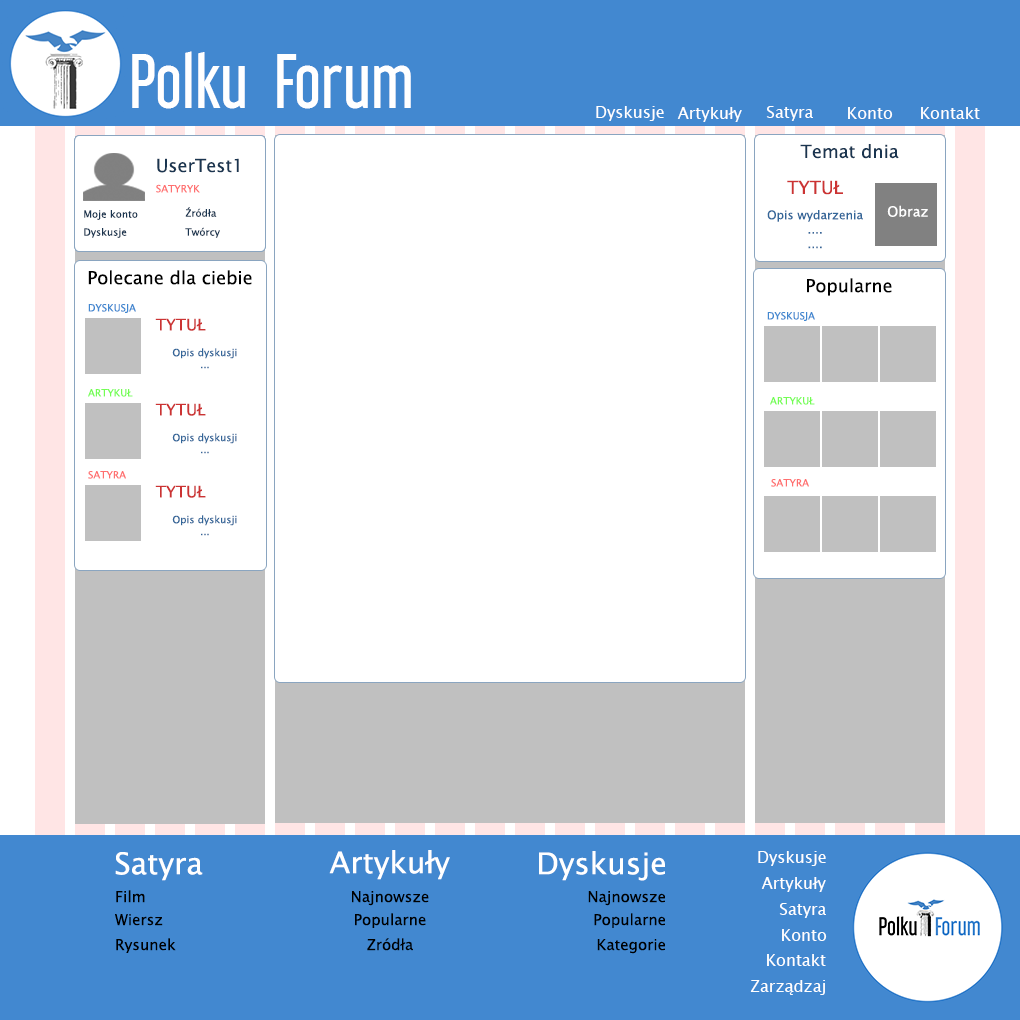
<style>
.page{position:relative;width:1020px;height:1020px;background:#ffffff}
.page>*{position:absolute;margin:0}
.t1{font:70px "LibelSuitRg-Regular";color:#ffffff}
.t2{font:16px "LucidaSansUnicode";color:#ffffff}
.t3{font:18px "LucidaSansUnicode";color:#1a3550}
.t4{font:10px "LucidaSansUnicode";color:#ff7070}
.t5{font:18px "LucidaSansUnicode";color:#cc3333}
.t6{font:10px "LucidaSansUnicode";color:#1a3550}
.t7{font:14px "LucidaSansUnicode";color:#ffffff}
.t8{font:12px "LucidaSansUnicode";color:#336699}
.t9{font:18px "LucidaSansUnicode";color:#000000}
.t10{font:10px "LucidaSansUnicode";color:#4288d0}
.t11{font:16px "LucidaSansUnicode";color:#cc3333}
.t12{font:10px "LucidaSansUnicode";color:#336699}
.t13{font:10px "LucidaSansUnicode";color:#74fd54}
.t14{font:30px "LucidaSansUnicode";color:#ffffff}
.t15{font:15px "LucidaSansUnicode";color:#000000}
</style>
<div class="page">
<p class="t1" style="left:132px;top:51px;width:279px;height:58px">Polku  Forum</p>
<p class="t2" style="left:596px;top:106px;width:68px;height:15px">Dyskusje</p>
<p class="t2" style="left:677px;top:107px;width:65px;height:15px">Artykuły</p>
<p class="t2" style="left:766px;top:106px;width:47px;height:15px">Satyra</p>
<p class="t2" style="left:848px;top:107px;width:45px;height:12px">Konto</p>
<p class="t2" style="left:921px;top:107px;width:59px;height:12px">Kontakt</p>
<p class="t3" style="left:800px;top:144px;width:99px;height:15px">Temat dnia</p>
<p class="t3" style="left:157px;top:158px;width:82px;height:15px">UserTest1</p>
<p class="t4" style="left:156px;top:184px;width:44px;height:9px">SATYRYK</p>
<p class="t5" style="left:787px;top:180px;width:56px;height:15px">TYTUŁ</p>
<p class="t6" style="left:185px;top:207px;width:32px;height:10px">Źródła</p>
<p class="t7" style="left:887px;top:205px;width:41px;height:12px">Obraz</p>
<p class="t6" style="left:84px;top:210px;width:54px;height:10px">Moje konto</p>
<p class="t8" style="left:767px;top:210px;width:96px;height:39px;text-align:center">Opis wydarzenia<br>....<br>....</p>
<p class="t6" style="left:84px;top:228px;width:43px;height:10px">Dyskusje</p>
<p class="t6" style="left:185px;top:227px;width:35px;height:11px">Twórcy</p>
<p class="t9" style="left:88px;top:270px;width:164px;height:15px">Polecane dla ciebie</p>
<p class="t9" style="left:807px;top:278px;width:85px;height:18px">Popularne</p>
<p class="t10" style="left:88px;top:304px;width:48px;height:9px">DYSKUSJA</p>
<p class="t11" style="left:155px;top:318px;width:51px;height:13px">TYTUŁ</p>
<p class="t10" style="left:767px;top:312px;width:48px;height:9px">DYSKUSJA</p>
<p class="t12" style="left:172px;top:348px;width:65px;height:21px;text-align:center">Opis dyskusji<br>...</p>
<p class="t13" style="left:88px;top:389px;width:45px;height:8px">ARTYKUŁ</p>
<p class="t13" style="left:770px;top:397px;width:45px;height:8px">ARTYKUŁ</p>
<p class="t11" style="left:155px;top:403px;width:51px;height:13px">TYTUŁ</p>
<p class="t12" style="left:172px;top:433px;width:65px;height:21px;text-align:center">Opis dyskusji<br>...</p>
<p class="t4" style="left:88px;top:471px;width:38px;height:8px">SATYRA</p>
<p class="t11" style="left:155px;top:485px;width:51px;height:13px">TYTUŁ</p>
<p class="t4" style="left:771px;top:479px;width:38px;height:8px">SATYRA</p>
<p class="t12" style="left:172px;top:515px;width:65px;height:21px;text-align:center">Opis dyskusji<br>...</p>
<p class="t14" style="left:115px;top:852px;width:88px;height:29px">Satyra</p>
<p class="t14" style="left:329px;top:850px;width:121px;height:30px">Artykuły</p>
<p class="t14" style="left:539px;top:851px;width:126px;height:30px">Dyskusje</p>
<p class="t2" style="left:758px;top:851px;width:68px;height:15px">Dyskusje</p>
<p class="t2" style="left:761px;top:877px;width:65px;height:15px">Artykuły</p>
<p class="t15" style="left:116px;top:890px;width:29px;height:13px">Film</p>
<p class="t15" style="left:352px;top:891px;width:77px;height:15px">Najnowsze</p>
<p class="t15" style="left:588px;top:891px;width:77px;height:15px">Najnowsze</p>
<p class="t2" style="left:779px;top:903px;width:47px;height:15px">Satyra</p>
<p class="t15" style="left:115px;top:914px;width:48px;height:12px">Wiersz</p>
<p class="t15" style="left:355px;top:913px;width:71px;height:15px">Popularne</p>
<p class="t15" style="left:594px;top:913px;width:71px;height:15px">Popularne</p>
<p class="t2" style="left:782px;top:929px;width:45px;height:12px">Konto</p>
<p class="t15" style="left:116px;top:938px;width:60px;height:15px">Rysunek</p>
<p class="t15" style="left:367px;top:938px;width:46px;height:13px">Zródła</p>
<p class="t15" style="left:597px;top:939px;width:68px;height:15px">Kategorie</p>
<p class="t2" style="left:767px;top:954px;width:59px;height:12px">Kontakt</p>
<p class="t2" style="left:750px;top:980px;width:75px;height:15px">Zarządzaj</p>
</div>
